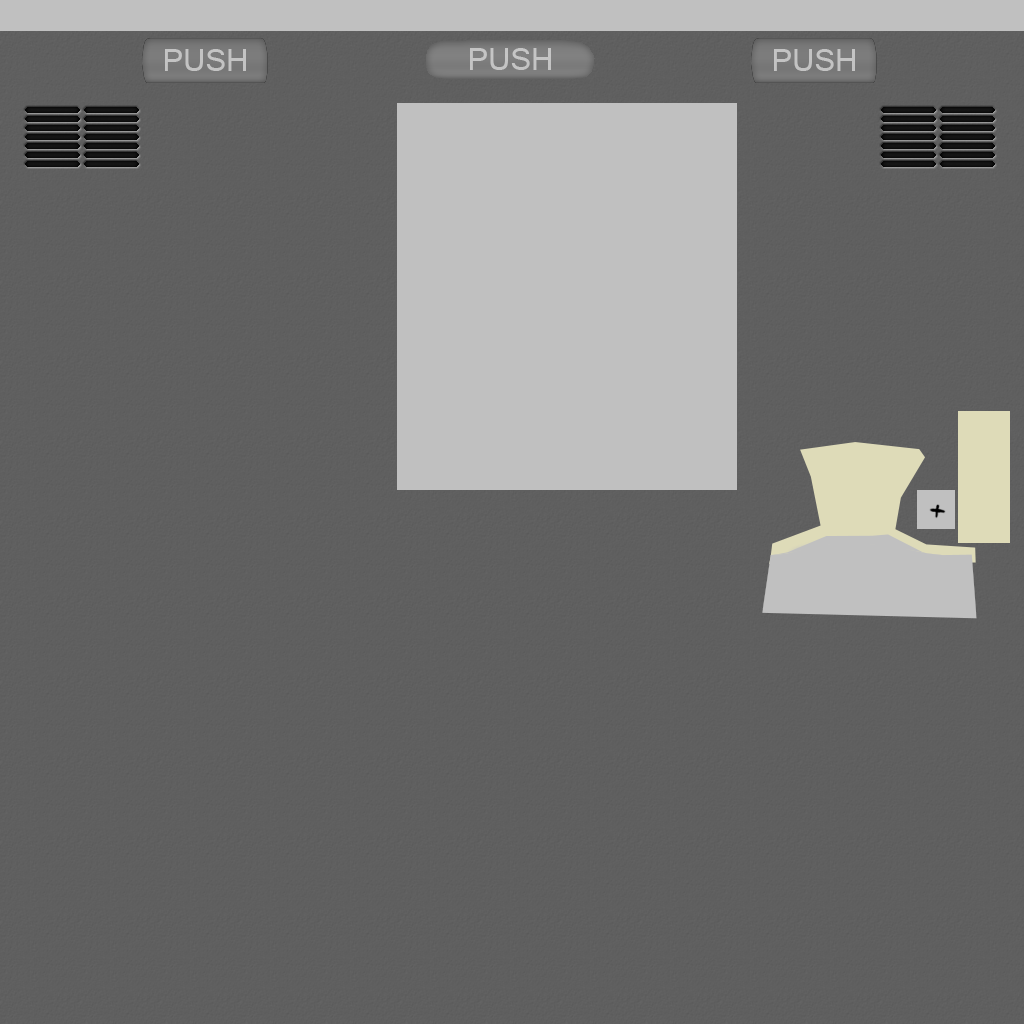
<style>
.page{position:relative;width:1024px;height:1024px;background:#606060}
.page>*{position:absolute;margin:0}
.t1{font:30px "Mangal";color:#c3c3c3}
.t2{font:30px "Mangal";color:#c5c5c5}
</style>
<div class="page">
<p class="t1" style="left:165px;top:49px;width:81px;height:22px">PUSH</p>
<p class="t2" style="left:470px;top:48px;width:81px;height:22px">PUSH</p>
<p class="t1" style="left:774px;top:49px;width:81px;height:22px">PUSH</p>
</div>
